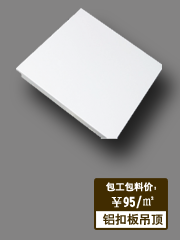
<style>
.page{position:relative;width:180px;height:240px;background:#848383}
.page>*{position:absolute;margin:0}
.t1{font:9.4px "HeitiCSEG";color:#fffefe}
.t2{font:12.6px "HeitiCSEG";color:#ffffff}
.t3{font:12.6px "SimSun";color:#ffffff}
.t4{font:12.1px "HeitiCSEG";color:#412c00}
</style>
<div class="page">
<p class="t1" style="left:106px;top:182px;width:50px;height:10px">包工包料价：</p>
<p class="t2" style="left:111px;top:195px;width:43px;height:14px">￥95/<span class="t3">㎡</span></p>
<p class="t4" style="left:103px;top:213px;width:60px;height:12px">铝扣板吊顶</p>
</div>
